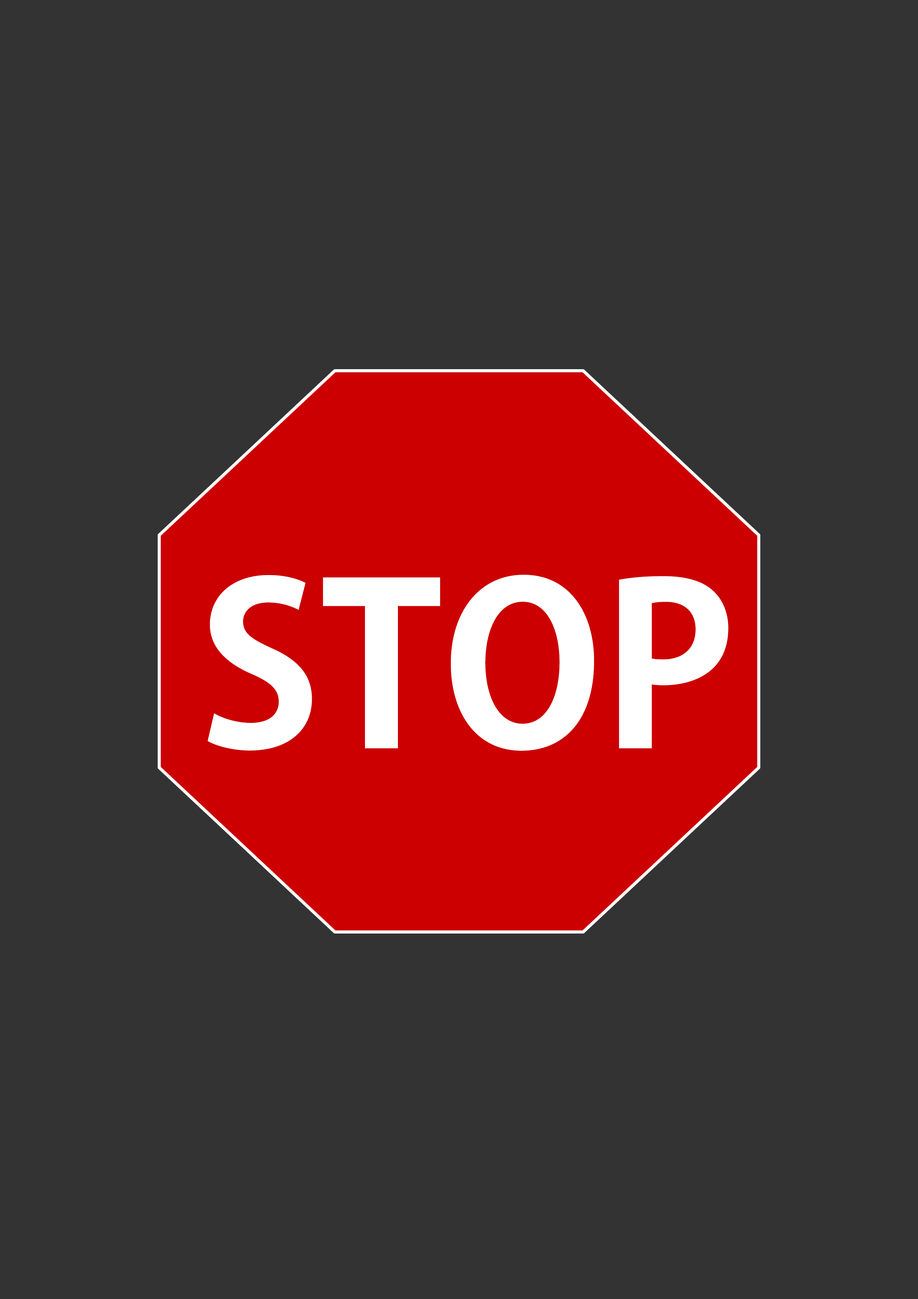
<style>
.page{position:relative;width:918px;height:1299px;background:#333333}
.page>*{position:absolute;margin:0}
.t1{font:221.9px "KozGoPr6N-Bold";color:#ffffff}
</style>
<div class="page">
<p class="t1" style="left:208px;top:575px;width:521px;height:176px">STOP</p>
</div>
